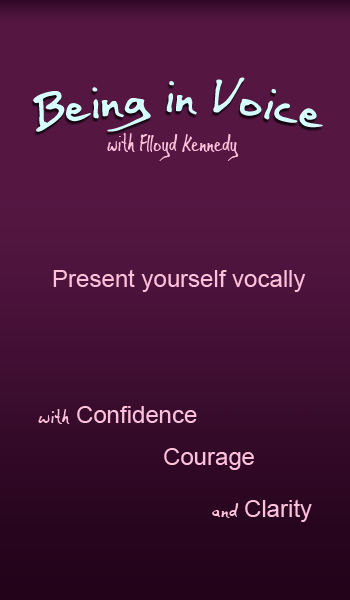
<style>
.page{position:relative;width:350px;height:600px;background:#551642}
.page>*{position:absolute;margin:0}
.t1{font:60px "BaileyMF";color:#d6ffff}
.t2{font:30px "BaileyMF";color:#fec1db;scale:0.7 1}
.t3{font:24px "ArialMT";color:#fec1db}
.t4{font:24px "BaileyMF";color:#fec1db}
</style>
<div class="page">
<p class="t1" style="left:33px;top:77px;width:290px;height:55px">Being in Voice</p>
<p class="t2" style="left:107px;top:133px;width:132px;height:28px">with Flloyd Kennedy</p>
<p class="t3" style="left:53px;top:269px;width:253px;height:23px">Present yourself vocally</p>
<p class="t3" style="left:38px;top:406px;width:159px;height:18px"><span class="t4">with </span>Confidence</p>
<p class="t3" style="left:164px;top:448px;width:90px;height:22px">Courage</p>
<p class="t3" style="left:212px;top:499px;width:100px;height:23px"><span class="t4">and </span>Clarity</p>
</div>
